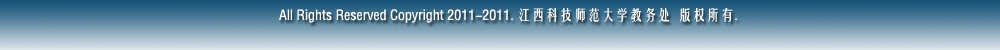
<style>
.page{position:relative;width:1000px;height:50px}
.page>*{position:absolute;margin:0}
.t1{font:14px "FZYTJW--GB1-0";color:#ffffff}
</style>
<div class="page">
<p class="t1" style="left:279px;top:8px;width:458px;height:15px">All Rights Reserved Copyright 2011-2011. 江西科技师范大学教务处  版权所有.</p>
</div>
